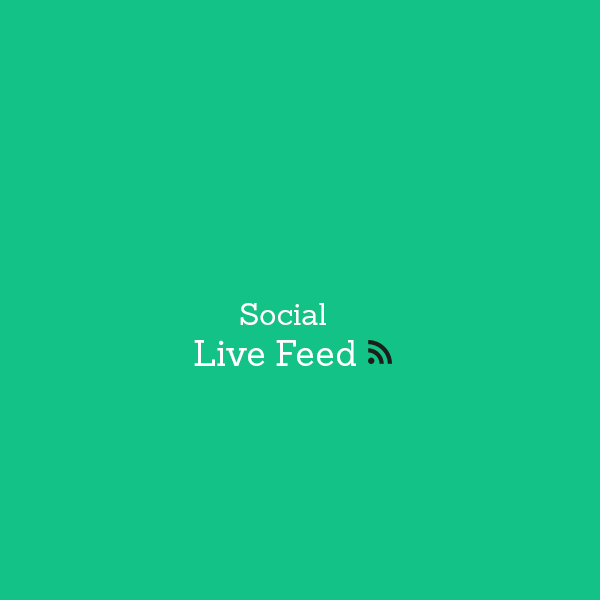
<style>
.page{position:relative;width:600px;height:600px;background:#12c286}
.page>*{position:absolute;margin:0}
.t1{font:30px "SanchezSlab";color:#ffffff}
.t2{font:36px "SanchezSlab";color:#ffffff}
</style>
<div class="page">
<p class="t1" style="left:240px;top:303px;width:86px;height:22px">Social</p>
<p class="t2" style="left:194px;top:340px;width:162px;height:26px">Live Feed</p>
</div>
